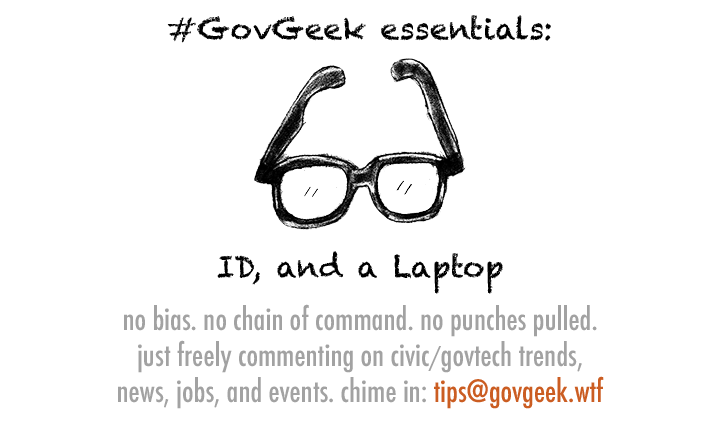
<style>
.page{position:relative;width:720px;height:425px;background:#ffffff}
.page>*{position:absolute;margin:0}
.t1{font:30px "Chalkduster";color:#000000}
.t2{font:30px/36px "Futura-CondensedMedium";color:#a2a2a2}
.t3{font:24px/36px "Futura-CondensedMedium";color:#a2a2a2;text-transform:uppercase}
.t4{font:30px/36px "Futura-CondensedMedium";color:#cb5d22}
</style>
<div class="page">
<p class="t1" style="left:167px;top:15px;width:384px;height:28px">#GovGeek essentials:</p>
<p class="t1" style="left:217px;top:251px;width:286px;height:43px">ID, and a Laptop</p>
<p class="t2" style="left:118px;top:304px;width:486px;height:105px;text-align:center">no bias. no chain of command. no punches pulled. <br>just freely commenting on civic<span class="t3">/</span>govtech trends, <br>news, jobs, and events. chime in: <span class="t4">tips@govgeek.wtf</span></p>
</div>
